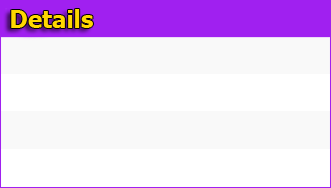
<style>
.page{position:relative;width:331px;height:188px;background:#ffffff}
.page>*{position:absolute;margin:0}
.t1{font:24px "Tahoma-Bold";color:#ffd700}
</style>
<div class="page">
<p class="t1" style="left:11px;top:9px;width:82px;height:19px">Details</p>
</div>
